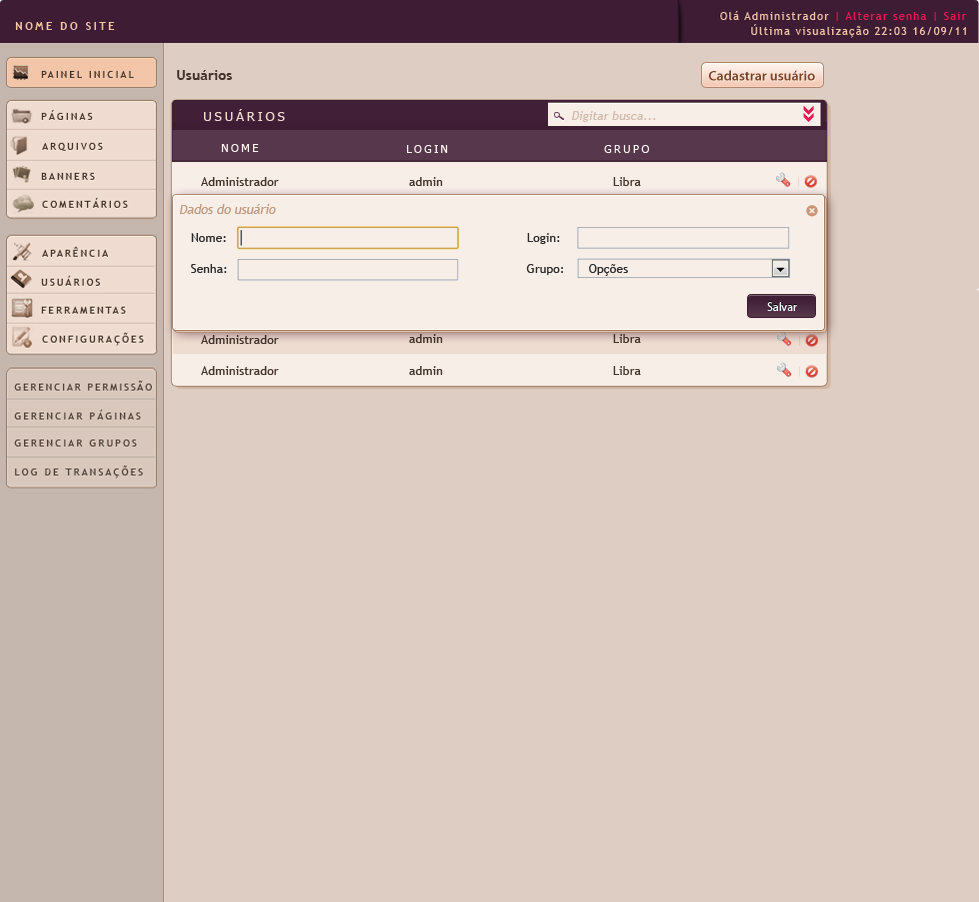
<style>
.page{position:relative;width:979px;height:902px;background:#decdc3}
.page>*{position:absolute;margin:0}
.t1{font:14.2px "TrebuchetMS-Bold";color:#43342b}
.t2{font:14px "MyriadPro-Semibold";color:#7a4427}
.t3{font:13.3px "Tahoma";letter-spacing:0.2em;color:#efdcd0;text-transform:uppercase}
.t4{font:12.3px "TrebuchetMS";color:#d2b9aa;font-style:italic}
.t5{font:11.3px "Tahoma";letter-spacing:0.2em;color:#fff6f0;text-transform:uppercase}
.t6{font:12.3px "TrebuchetMS";color:#43342b}
.t7{font:12.7px "TrebuchetMS";color:#c29a81;font-style:italic}
.t8{font:12.3px "TrebuchetMS";color:#2b2b2b}
.t9{font:12px "MyriadPro-Regular";color:#edf8fa}
</style>
<div class="page">
<p class="t1" style="left:177px;top:70px;width:55px;height:10px">Usuários</p>
<p class="t2" style="left:709px;top:70px;width:106px;height:11px">Cadastrar usuário</p>
<p class="t3" style="left:204px;top:109px;width:81px;height:12px">USUÁRIOS</p>
<p class="t4" style="left:572px;top:111px;width:84px;height:11px">Digitar busca...</p>
<p class="t5" style="left:221px;top:144px;width:38px;height:8px">NOME</p>
<p class="t5" style="left:407px;top:145px;width:41px;height:8px">LOGIN</p>
<p class="t5" style="left:604px;top:145px;width:45px;height:8px">GRUPO</p>
<p class="t6" style="left:201px;top:177px;width:78px;height:9px">Administrador</p>
<p class="t6" style="left:409px;top:177px;width:34px;height:9px">admin</p>
<p class="t6" style="left:613px;top:177px;width:28px;height:9px">Libra</p>
<p class="t7" style="left:179px;top:204px;width:97px;height:10px">Dados do usuário</p>
<p class="t8" style="left:191px;top:233px;width:35px;height:9px">Nome:</p>
<p class="t8" style="left:527px;top:233px;width:33px;height:11px">Login:</p>
<p class="t8" style="left:191px;top:264px;width:36px;height:9px">Senha:</p>
<p class="t8" style="left:526px;top:264px;width:37px;height:11px">Grupo:</p>
<p class="t8" style="left:589px;top:264px;width:39px;height:12px">Opções</p>
<p class="t9" style="left:767px;top:302px;width:30px;height:9px">Salvar</p>
<p class="t6" style="left:201px;top:335px;width:78px;height:9px">Administrador</p>
<p class="t6" style="left:409px;top:334px;width:34px;height:9px">admin</p>
<p class="t6" style="left:613px;top:334px;width:28px;height:9px">Libra</p>
<p class="t6" style="left:201px;top:366px;width:78px;height:9px">Administrador</p>
<p class="t6" style="left:409px;top:366px;width:34px;height:9px">admin</p>
<p class="t6" style="left:613px;top:366px;width:28px;height:9px">Libra</p>
</div>
